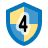
<style>
.page{position:relative;width:48px;height:48px;background:#ffffff}
.page>*{position:absolute;margin:0}
.t1{font:22.5px "ArialRoundedMTBold";letter-spacing:0.12em;color:#000000;font-weight:bold;scale:0.67 1}
</style>
<div class="page">
<p class="t1" style="left:18px;top:15px;width:10px;height:18px">4</p>
</div>
